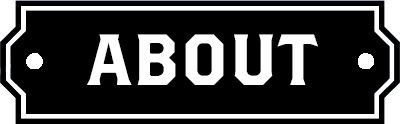
<style>
.page{position:relative;width:400px;height:124px;background:#000000}
.page>*{position:absolute;margin:0}
.t1{font:72px "Brothers";color:#ffffff}
</style>
<div class="page">
<p class="t1" style="left:87px;top:34px;width:231px;height:51px">ABOUT</p>
</div>
